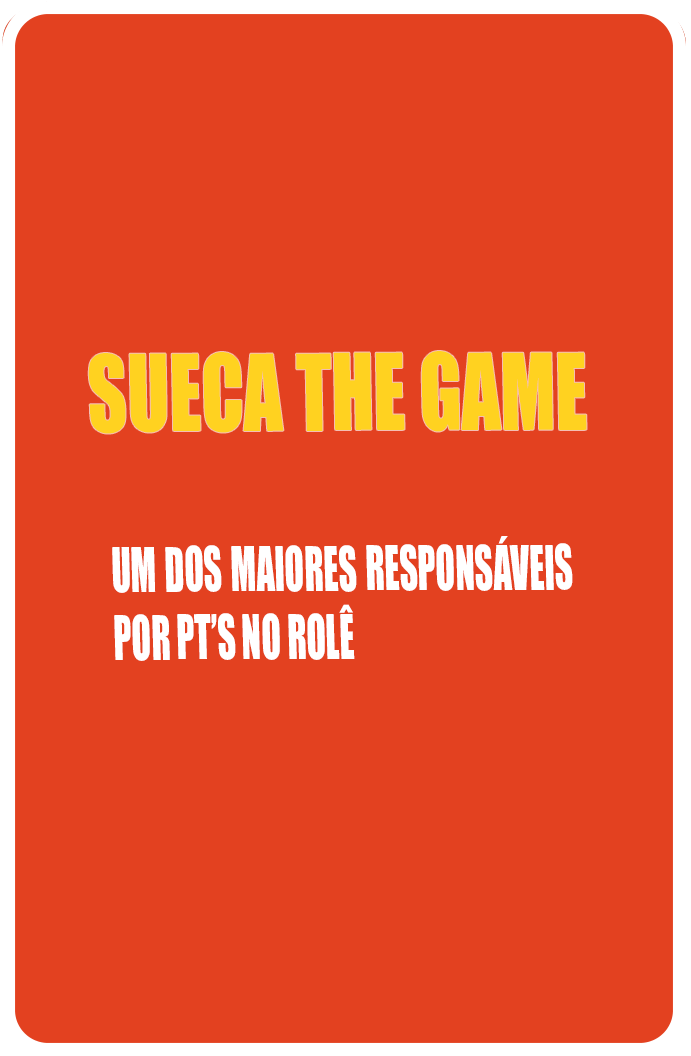
<style>
.page{position:relative;width:691px;height:1056px;background:#e34120}
.page>*{position:absolute;margin:0}
.t1{font:97.7px "Impact";color:#ffd220;scale:0.78 1}
.t2{font:56.7px "Impact";color:#ffffff;scale:0.63 1}
</style>
<div class="page">
<p class="t1" style="left:88px;top:351px;width:499px;height:83px">SUECA THE GAME</p>
<p class="t2" style="left:112px;top:536px;width:461px;height:125px;text-align:justify">UM DOS MAIORES RESPONSÁVEIS POR PT’S NO ROLÊ</p>
</div>
